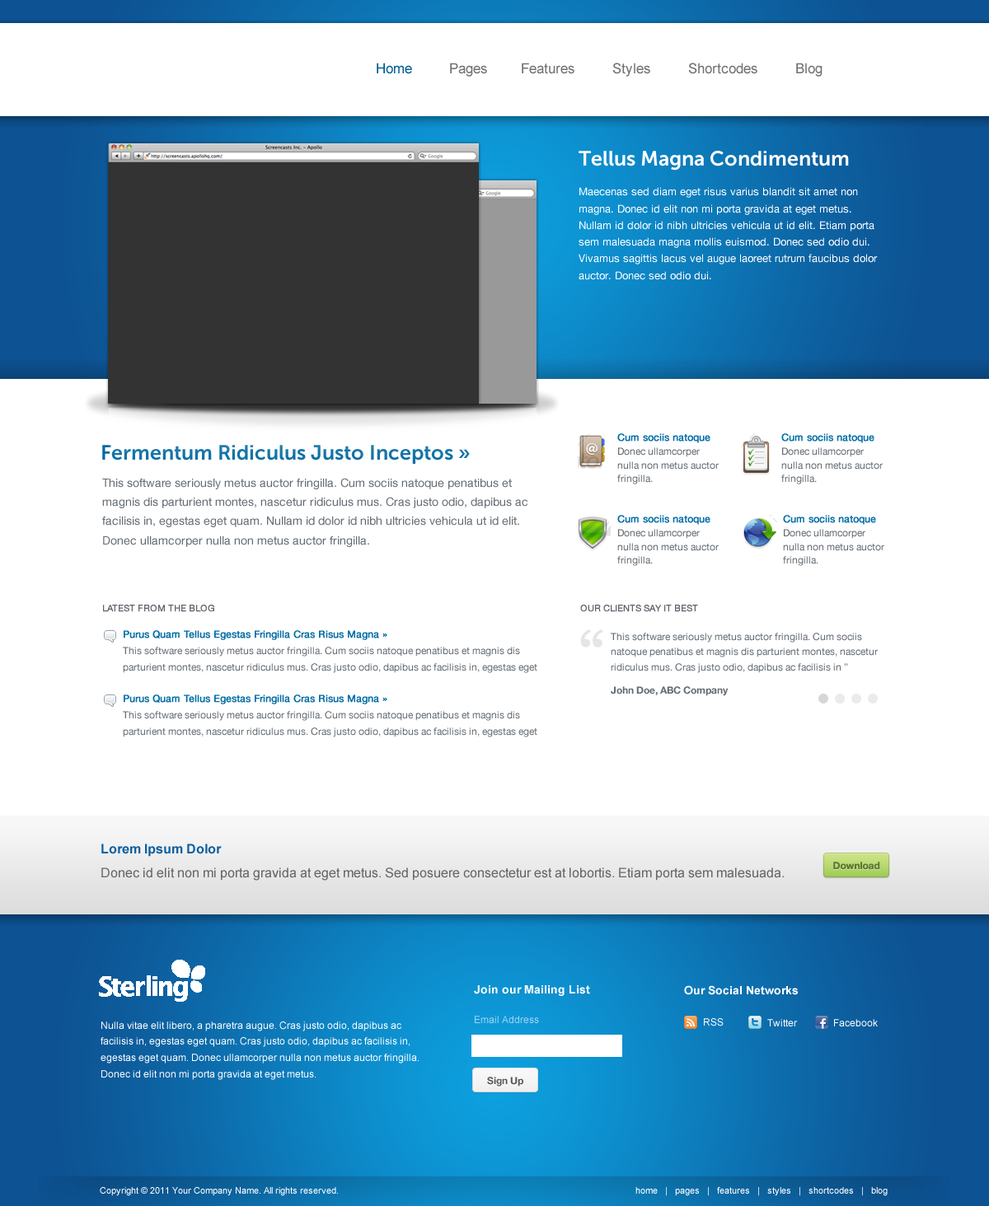
<style>
.page{position:relative;width:989px;height:1206px;background:#ffffff}
.page>*{position:absolute;margin:0}
.t1{font:14px "ArialMT";color:#727272}
.t2{font:14px "ArialMT";color:#005f99}
.t3{font:20.6px "MuseoSans-700";color:#ffffff}
.t4{font:10.7px/16.7px "HelveticaNeue";color:#ffffff}
.t5{font:9.9px/13.9px "HelveticaNeue";color:#636b72}
.t6{font:9.9px/13.9px "HelveticaNeue";color:#006da6;font-weight:bold}
.t7{font:20.6px "MuseoSans-700";color:#0068a0}
.t8{font:11.5px/19.1px "HelveticaNeue";color:#636b72}
.t9{font:9.1px "HelveticaNeue";color:#5d636b;font-weight:bold}
.t10{font:65.9px "Georgia";letter-spacing:-0.099em;color:#e5e5e5;font-weight:bold}
.t11{font:9.9px/16.4px "HelveticaNeue";color:#636b72}
.t12{font:9.9px/16.4px "HelveticaNeue";color:#006ca5;font-weight:bold}
.t13{font:9.9px/15.2px "HelveticaNeue";color:#636b72}
.t14{font:9.9px "HelveticaNeue-Bold";color:#636b72}
.t15{font:13.2px "Arial-BoldMT";color:#0d60a0}
.t16{font:13.2px "ArialMT";color:#666666}
.t17{font:9.9px "HelveticaNeue-Bold";color:#5d7731}
.t18{font:11.5px "Arial-BoldMT";color:#ffffff}
.t19{font:9.9px/16.2px "ArialMT";color:#ffffff}
.t20{font:9.9px "ArialMT";color:#9ed6ef}
.t21{font:9.9px "ArialMT";color:#ffffff}
.t22{font:9.9px "HelveticaNeue-Bold";color:#555555}
.t23{font:9.1px "ArialMT";color:#ffffff}
</style>
<div class="page">
<p class="t1" style="left:377px;top:63px;width:445px;height:14px"><span class="t2">Home</span>         Pages        Features         Styles         Shortcodes         Blog</p>
<p class="t3" style="left:578px;top:151px;width:271px;height:20px">Tellus Magna Condimentum</p>
<p class="t4" style="left:578px;top:187px;width:299px;height:93px">Maecenas sed diam eget risus varius blandit sit amet non magna. Donec id elit non mi porta gravida at eget metus. Nullam id dolor id nibh ultricies vehicula ut id elit. Etiam porta sem malesuada magna mollis euismod. Donec sed odio dui. Vivamus sagittis lacus vel augue laoreet rutrum faucibus dolor auctor. Donec sed odio dui.</p>
<p class="t5" style="left:617px;top:433px;width:101px;height:51px"><span class="t6">Cum sociis natoque<br></span>Donec ullamcorper nulla non metus auctor fringilla.</p>
<p class="t5" style="left:781px;top:433px;width:101px;height:51px"><span class="t6">Cum sociis natoque<br></span>Donec ullamcorper nulla non metus auctor fringilla.</p>
<p class="t7" style="left:102px;top:445px;width:368px;height:19px">Fermentum Ridiculus Justo Inceptos »</p>
<p class="t8" style="left:102px;top:478px;width:425px;height:69px">This software seriously metus auctor fringilla. Cum sociis natoque penatibus et magnis dis parturient montes, nascetur ridiculus mus. Cras justo odio, dapibus ac facilisis in, egestas eget quam. Nullam id dolor id nibh ultricies vehicula ut id elit. Donec ullamcorper nulla non metus auctor fringilla.</p>
<p class="t5" style="left:617px;top:515px;width:101px;height:51px"><span class="t6">Cum sociis natoque<br></span>Donec ullamcorper nulla non metus auctor fringilla.</p>
<p class="t5" style="left:783px;top:515px;width:101px;height:51px"><span class="t6">Cum sociis natoque<br></span>Donec ullamcorper nulla non metus auctor fringilla.</p>
<p class="t9" style="left:103px;top:605px;width:111px;height:7px">LATEST FROM THE BLOG</p>
<p class="t9" style="left:580px;top:605px;width:118px;height:7px">OUR CLIENTS SAY IT BEST</p>
<p class="t10" style="left:580px;top:629px;width:23px;height:19px">“</p>
<p class="t11" style="left:123px;top:630px;width:414px;height:43px"><span class="t12">Purus Quam Tellus Egestas Fringilla Cras Risus Magna »<br></span>This software seriously metus auctor fringilla. Cum sociis natoque penatibus et magnis dis parturient montes, nascetur ridiculus mus. Cras justo odio, dapibus ac facilisis in, egestas eget</p>
<p class="t13" style="left:610px;top:633px;width:267px;height:40px">This software seriously metus auctor fringilla. Cum sociis natoque penatibus et magnis dis parturient montes, nascetur ridiculus mus. Cras justo odio, dapibus ac facilisis in ”</p>
<p class="t14" style="left:610px;top:686px;width:118px;height:10px">John Doe, ABC Company</p>
<p class="t11" style="left:123px;top:695px;width:414px;height:42px"><span class="t12">Purus Quam Tellus Egestas Fringilla Cras Risus Magna »<br></span>This software seriously metus auctor fringilla. Cum sociis natoque penatibus et magnis dis parturient montes, nascetur ridiculus mus. Cras justo odio, dapibus ac facilisis in, egestas eget</p>
<p class="t15" style="left:101px;top:844px;width:121px;height:13px">Lorem Ipsum Dolor</p>
<p class="t16" style="left:101px;top:868px;width:682px;height:13px">Donec id elit non mi porta gravida at eget metus. Sed posuere consectetur est at lobortis. Etiam porta sem malesuada.</p>
<p class="t17" style="left:833px;top:862px;width:47px;height:8px">Download</p>
<p class="t18" style="left:474px;top:985px;width:116px;height:11px">Join our Mailing List</p>
<p class="t18" style="left:684px;top:985px;width:114px;height:10px">Our Social Networks</p>
<p class="t19" style="left:101px;top:1022px;width:318px;height:58px">Nulla vitae elit libero, a pharetra augue. Cras justo odio, dapibus ac facilisis in, egestas eget quam. Cras justo odio, dapibus ac facilisis in, egestas eget quam. Donec ullamcorper nulla non metus auctor fringilla.<br>Donec id elit non mi porta gravida at eget metus.</p>
<p class="t20" style="left:475px;top:1016px;width:64px;height:7px">Email Address</p>
<p class="t21" style="left:704px;top:1018px;width:19px;height:9px">RSS</p>
<p class="t21" style="left:767px;top:1019px;width:31px;height:8px">Twitter</p>
<p class="t21" style="left:834px;top:1019px;width:43px;height:8px">Facebook</p>
<p class="t22" style="left:487px;top:1077px;width:36px;height:10px">Sign Up</p>
<p class="t23" style="left:100px;top:1187px;width:238px;height:9px">Copyright © 2011 Your Company Name. All rights reserved.</p>
<p class="t23" style="left:635px;top:1187px;width:252px;height:9px">home   |   pages   |   features   |   styles   |   shortcodes   |   blog</p>
</div>
